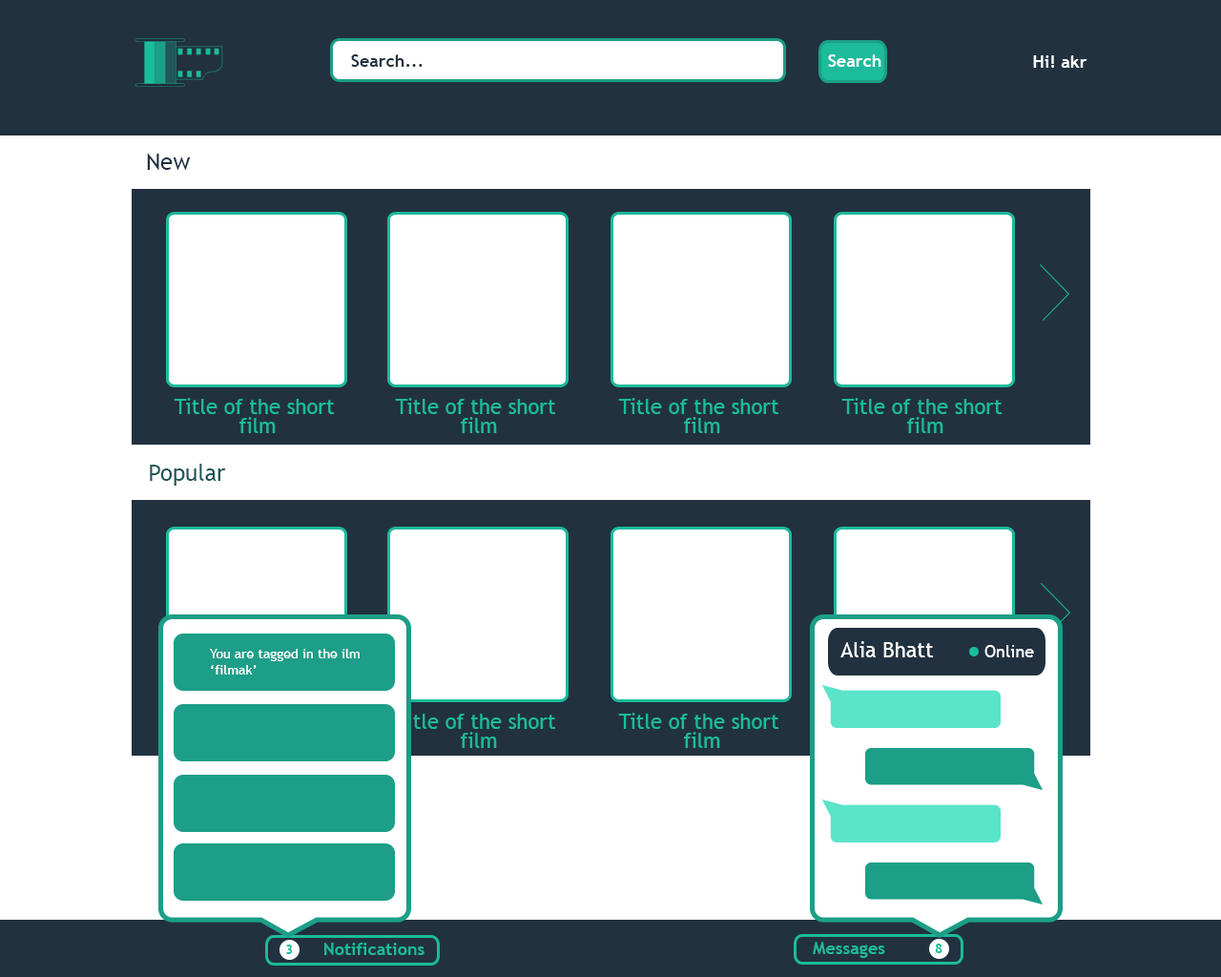
<style>
.page{position:relative;width:1221px;height:977px;background:#ffffff}
.page>*{position:absolute;margin:0}
.t1{font:17.2px "TrebuchetMS-Bold";color:#213140}
.t2{font:17.2px "TrebuchetMS-Bold";color:#ffffff}
.t3{font:22.9px "TrebuchetMS";color:#213140}
.t4{font:21px/19.1px "TrebuchetMS";color:#1bbb9b}
.t5{font:22.9px "TrebuchetMS";color:#20585a}
.t6{font:21px "TrebuchetMS";color:#ffffff}
.t7{font:13.4px "TrebuchetMS";color:#ffffff}
.t8{font:17.2px "TrebuchetMS";color:#ffffff}
.t9{font:17.2px "TrebuchetMS-Bold";color:#1bbb9b}
.t10{font:13.4px "TrebuchetMS-Bold";color:#1bbb9b}
</style>
<div class="page">
<p class="t1" style="left:351px;top:54px;width:72px;height:13px">Search...</p>
<p class="t2" style="left:828px;top:54px;width:53px;height:13px">Search</p>
<p class="t2" style="left:1033px;top:55px;width:54px;height:13px">Hi! akr</p>
<p class="t3" style="left:147px;top:154px;width:44px;height:16px">New</p>
<p class="t4" style="left:174px;top:398px;width:161px;height:35px;text-align:center">Title of the short <br>film</p>
<p class="t4" style="left:395px;top:398px;width:161px;height:35px;text-align:center">Title of the short <br>film</p>
<p class="t4" style="left:618px;top:398px;width:161px;height:35px;text-align:center">Title of the short <br>film</p>
<p class="t4" style="left:841px;top:398px;width:161px;height:35px;text-align:center">Title of the short <br>film</p>
<p class="t5" style="left:150px;top:464px;width:76px;height:21px">Popular</p>
<p class="t6" style="left:840px;top:641px;width:94px;height:16px">Alia Bhatt</p>
<p class="t7" style="left:210px;top:649px;width:150px;height:25px">You are tagged in the ilm <br>‘filmak’</p>
<p class="t8" style="left:984px;top:645px;width:50px;height:12px">Online</p>
<p class="t4" style="left:395px;top:712px;width:161px;height:36px;text-align:center">Title of the short <br>film</p>
<p class="t4" style="left:618px;top:712px;width:161px;height:36px;text-align:center">Title of the short <br>film</p>
<p class="t9" style="left:813px;top:941px;width:72px;height:17px">Messages</p>
<p class="t10" style="left:286px;top:944px;width:7px;height:10px">3</p>
<p class="t9" style="left:324px;top:942px;width:100px;height:13px">Notifications</p>
<p class="t10" style="left:935px;top:943px;width:7px;height:10px">8</p>
</div>
